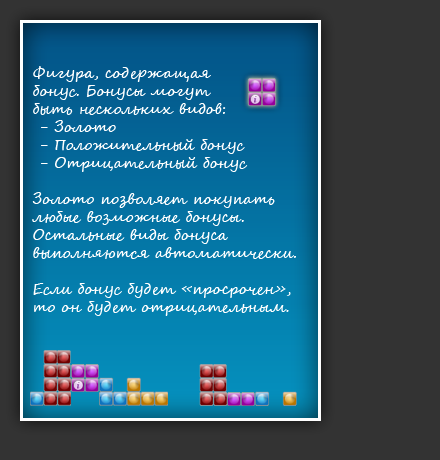
<style>
.page{position:relative;width:440px;height:460px;background:#333333}
.page>*{position:absolute;margin:0}
.t1{font:15px "SegoeScript";color:#ffffff}
</style>
<div class="page">
<p class="t1" style="left:32px;top:66px;width:264px;height:250px">Фигура, содержащая<br>бонус. Бонусы могут<br>быть нескольких видов:<br> - Золото<br> - Положительный бонус<br> - Отрицательный бонус<br><br>Золото позволяет покупать<br>любые возможные бонусы. <br>Остальные виды бонуса<br>выполняются автоматически.<br><br>Если бонус будет «просрочен»,<br>то он будет отрицательным.</p>
</div>
